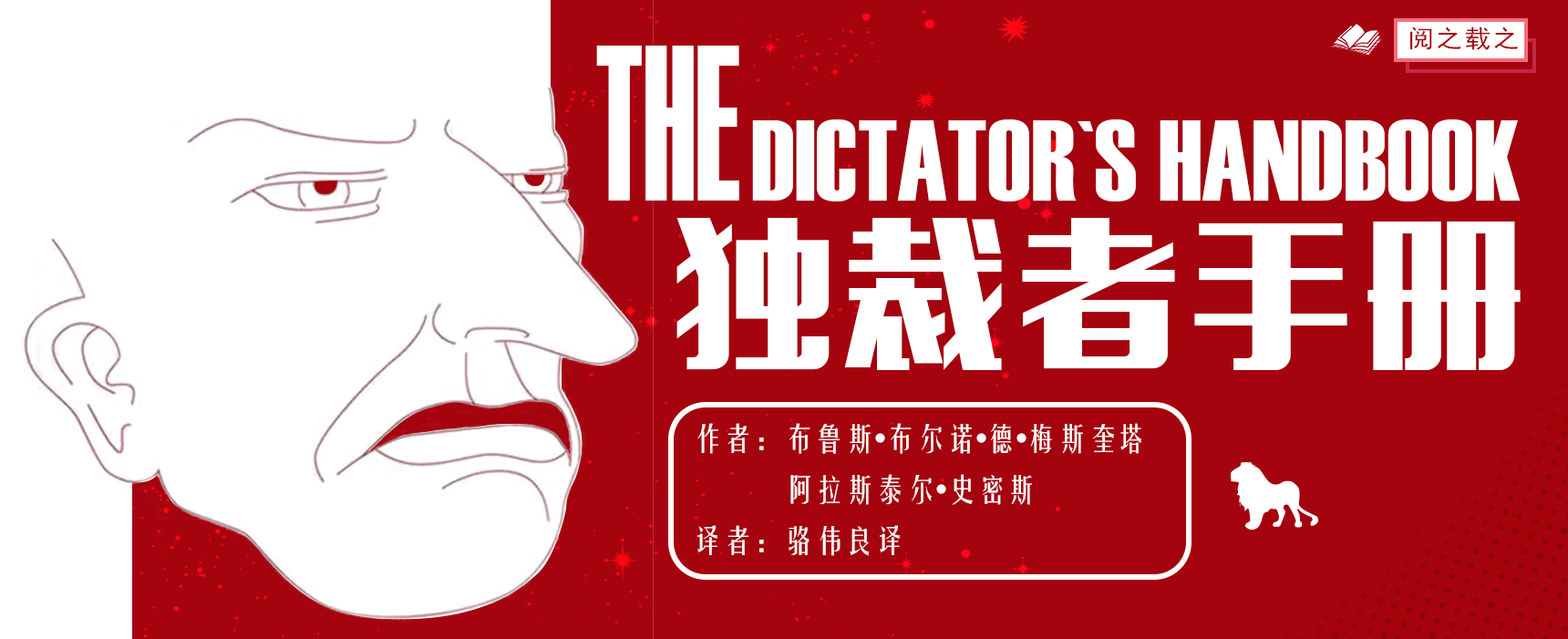
<style>
.page{position:relative;width:1568px;height:639px;background:#ffffff}
.page>*{position:absolute;margin:0}
.t1{font:24.9px "SimHei";letter-spacing:0.075em;color:#a5030e;scale:1.06 1}
.t2{font:221.4px "Haettenschweiler";color:#ffffff;scale:0.62 1}
.t3{font:114px "Haettenschweiler";color:#ffffff}
.t4{font:160.6px "MF-LiHei(Noncommercial)-Regular";letter-spacing:0.075em;color:#ffffff}
.t5{font:30.4px/12.8px "FZYTK--GBK1-0";color:#ffffff}
</style>
<div class="page">
<p class="t1" style="left:1410px;top:26px;width:108px;height:24px">阅之载之</p>
<p class="t2" style="left:596px;top:46px;width:143px;height:155px">THE</p>
<p class="t3" style="left:752px;top:119px;width:769px;height:82px">DICTATOR`S HANDBOOK</p>
<p class="t4" style="left:676px;top:218px;width:845px;height:152px">独裁者手册</p>
<p class="t5" style="left:697px;top:423px;width:444px;height:133px">作者：布鲁斯•布尔诺•德•梅斯奎塔 <br><br><br><br>            阿拉斯泰尔•史密斯  <br><br><br><br>译者：骆伟良译</p>
</div>
